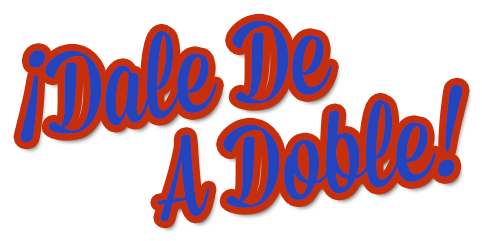
<style>
.page{position:relative;width:482px;height:241px;background:#ffffff}
.page>*{position:absolute;margin:0}
.t1{font:113.7px/102px "Mission-Script";color:#2344bd}
</style>
<div class="page">
<p class="t1" style="left:20px;top:20px;width:443px;height:202px;text-align:center;rotate:-9deg">¡Dale De <br>           A Doble!</p>
</div>
